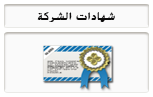
<style>
.page{position:relative;width:153px;height:97px;background:#fafafa}
.page>*{position:absolute;margin:0}
.t1{font:12px "BoutrosAdsMedium";color:#0c0b0b}
</style>
<div class="page">
<p class="t1" style="left:37px;top:12px;width:78px;height:10px">شهادات الشركة</p>
</div>
